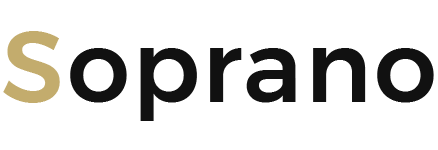
<style>
.page{position:relative;width:438px;height:150px;background:#ffffff}
.page>*{position:absolute;margin:0}
.t1{font:100px "Montserrat-Medium";letter-spacing:0.025em;color:#111111}
.t2{font:100px "Montserrat-Medium";letter-spacing:0.025em;color:#c3ac6d}
</style>
<div class="page">
<p class="t1" style="left:3px;top:31px;width:431px;height:90px"><span class="t2">S</span>oprano</p>
</div>
